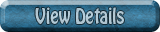
<style>
.page{position:relative;width:160px;height:32px}
.page>*{position:absolute;margin:0}
.t1{font:19.2px "HoboStd";color:#b2c9d5;scale:0.83 1}
</style>
<div class="page">
<p class="t1" style="left:35px;top:7px;width:89px;height:18px">View Details</p>
</div>
